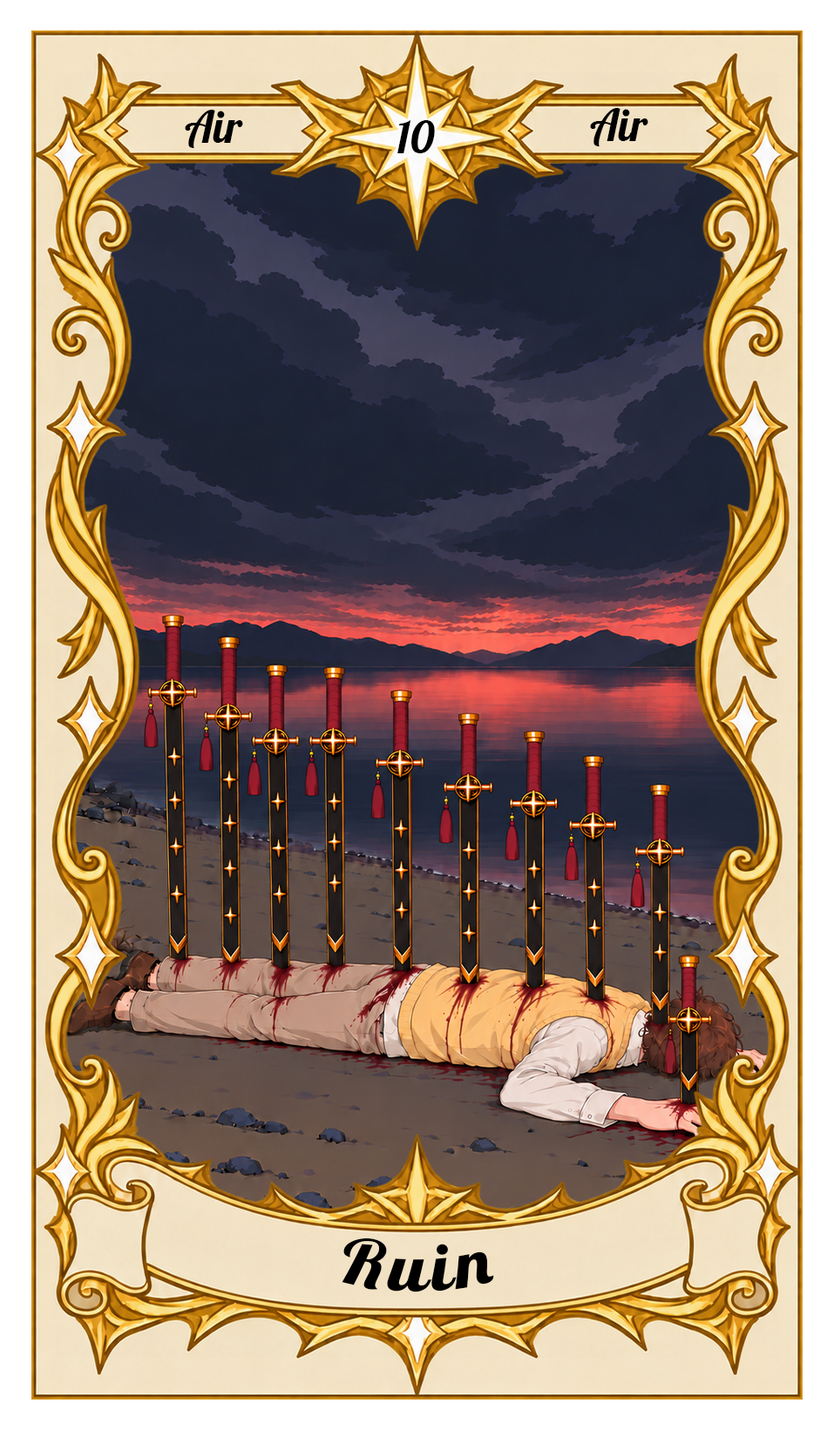
<style>
.page{position:relative;width:834px;height:1430px}
.page>*{position:absolute;margin:0}
.t1{font:43.6px "Lobster-Regular";color:#000000}
.t2{font:65.3px "Lobster-Regular";letter-spacing:0.05em;color:#000000}
</style>
<div class="page">
<p class="t1" style="left:185px;top:110px;width:58px;height:38px">Air</p>
<p class="t1" style="left:590px;top:108px;width:58px;height:38px">Air</p>
<p class="t1" style="left:397px;top:120px;width:38px;height:33px">10</p>
<p class="t2" style="left:341px;top:1238px;width:153px;height:55px">Ruin</p>
</div>
